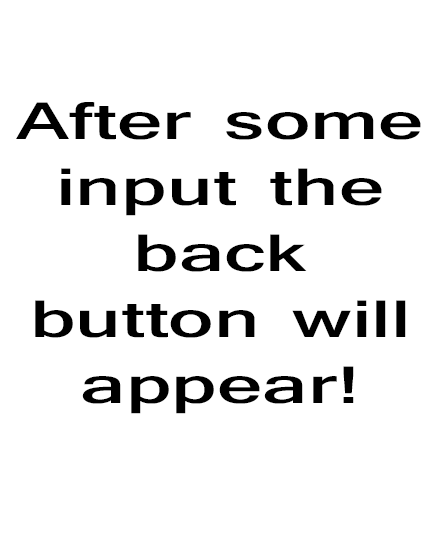
<style>
.page{position:relative;width:440px;height:541px;background:#ffffff}
.page>*{position:absolute;margin:0}
.t1{font:55px "Shruti-Bold";color:#000000;scale:1.55 1}
</style>
<div class="page">
<p class="t1" style="left:16px;top:102px;width:405px;height:312px;text-align:center">After some input the back button will appear!</p>
</div>
